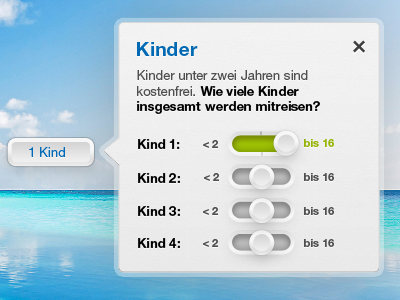
<style>
.page{position:relative;width:400px;height:300px}
.page>*{position:absolute;margin:0}
.t1{font:19px "HelveticaNeueLTStd-Bd";color:#0069b4}
.t2{font:13px "HelveticaNeueLTStd-Bd";color:#000000}
.t3{font:13px "HelveticaNeueLTStd-Roman";color:#4f4f4f}
.t4{font:13px "HelveticaNeueLTStd-Roman";color:#0069b4}
.t5{font:11px "HelveticaNeueLTStd-Bd";color:#4f4f4f}
.t6{font:11px "HelveticaNeueLTStd-Bd";color:#94b304}
</style>
<div class="page">
<p class="t1" style="left:137px;top:42px;width:61px;height:14px">Kinder</p>
<p class="t2" style="left:137px;top:70px;width:183px;height:44px"><span class="t3">Kinder unter zwei Jahren sind <br>kostenfrei. </span>Wie viele Kinder <br>insgesamt werden mitreisen?</p>
<p class="t4" style="left:29px;top:147px;width:36px;height:10px">1 Kind</p>
<p class="t2" style="left:138px;top:139px;width:42px;height:10px">Kind 1:</p>
<p class="t5" style="left:203px;top:140px;width:15px;height:8px">&lt; 2</p>
<p class="t6" style="left:304px;top:139px;width:30px;height:8px">bis 16</p>
<p class="t2" style="left:138px;top:173px;width:42px;height:10px">Kind 2:</p>
<p class="t5" style="left:204px;top:173px;width:15px;height:8px">&lt; 2</p>
<p class="t5" style="left:304px;top:173px;width:30px;height:8px">bis 16</p>
<p class="t2" style="left:138px;top:206px;width:42px;height:10px">Kind 3:</p>
<p class="t5" style="left:203px;top:207px;width:15px;height:8px">&lt; 2</p>
<p class="t5" style="left:304px;top:207px;width:30px;height:8px">bis 16</p>
<p class="t2" style="left:138px;top:238px;width:42px;height:10px">Kind 4:</p>
<p class="t5" style="left:203px;top:239px;width:15px;height:8px">&lt; 2</p>
<p class="t5" style="left:304px;top:239px;width:30px;height:8px">bis 16</p>
</div>
